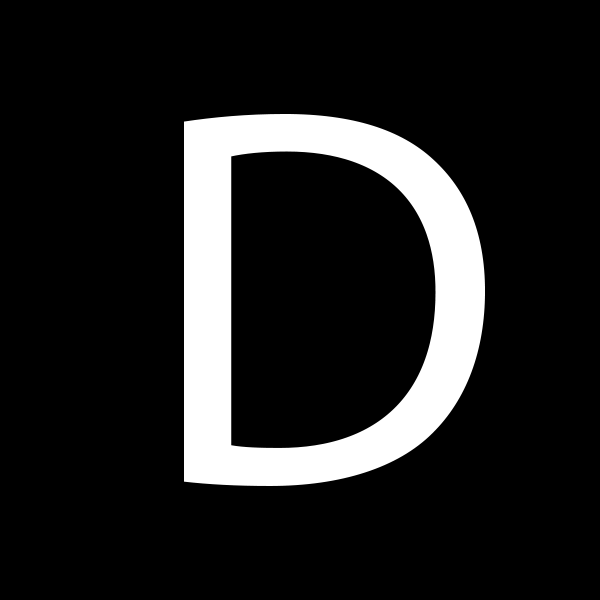
<style>
.page{position:relative;width:600px;height:600px;background:#000000}
.page>*{position:absolute;margin:0}
.t1{font:543.6px "MyriadPro-Regular";color:#ffffff}
</style>
<div class="page">
<p class="t1" style="left:184px;top:114px;width:301px;height:372px">D</p>
</div>
